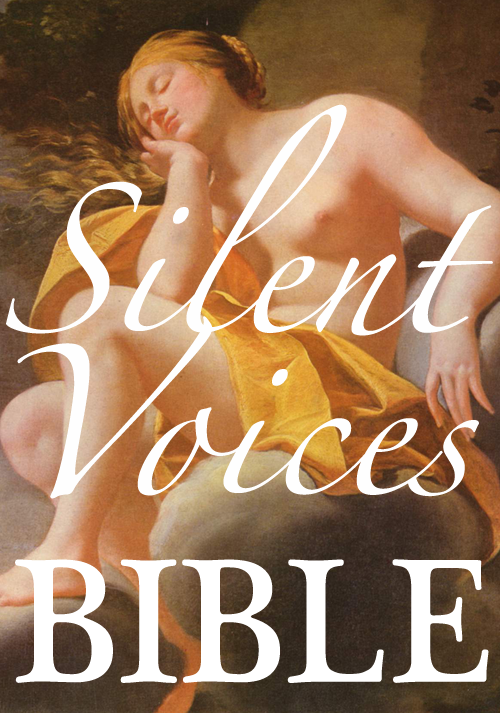
<style>
.page{position:relative;width:500px;height:713px}
.page>*{position:absolute;margin:0}
.t1{font:134.8px "Zapfino";color:#fefefe}
.t2{font:180.8px "PlantagenetCherokee";color:#ffffff;scale:0.95 1}
</style>
<div class="page">
<p class="t1" style="left:6px;top:104px;width:487px;height:395px">Silent<br>Voices</p>
<p class="t2" style="left:15px;top:559px;width:474px;height:124px">BIBLE</p>
</div>
